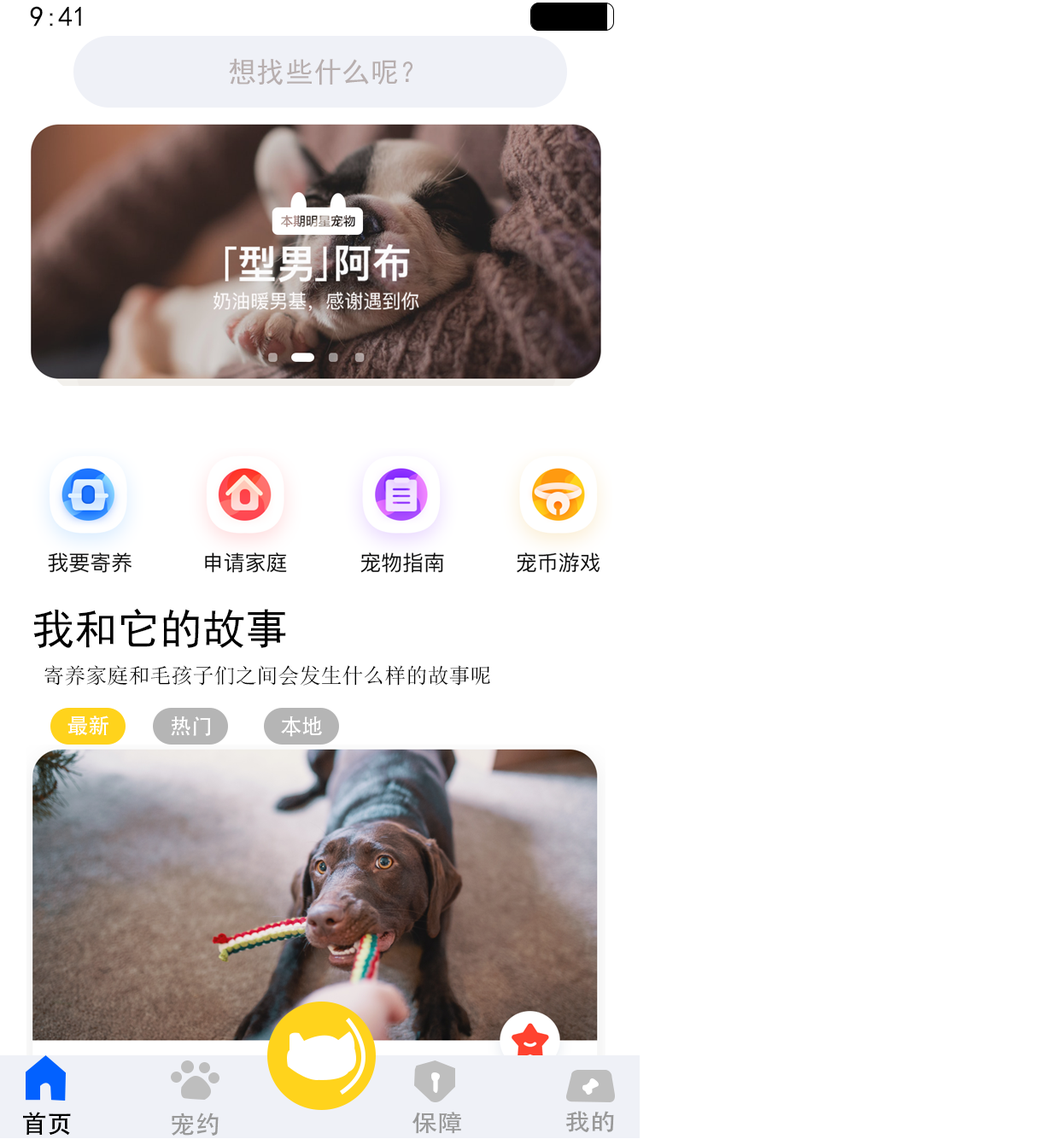
<style>
.page{position:relative;width:1047px;height:1139px;background:#ffffff}
.page>*{position:absolute;margin:0}
.t1{font:28.5px "SimHei";color:#000000}
.t2{font:28.5px "SimHei";color:#b8afaf}
.t3{font:42.7px "SimHei";color:#000000}
.t4{font:21.3px "SimSun";color:#000000}
.t5{font:21.3px "AdobeHeitiStd-Regular";color:#ffffff}
.t6{font:25px "AdobeHeitiStd-Regular";color:#000000}
.t7{font:25px "AdobeHeitiStd-Regular";color:#999999}
.t8{font:23.2px "AdobeHeitiStd-Regular";color:#999999;scale:1.1 1}
</style>
<div class="page">
<p class="t1" style="left:30px;top:6px;width:51px;height:20px">9:41</p>
<p class="t2" style="left:229px;top:58px;width:183px;height:27px">想找些什么呢？</p>
<p class="t3" style="left:33px;top:608px;width:253px;height:40px">我和它的故事</p>
<p class="t4" style="left:44px;top:665px;width:446px;height:21px">寄养家庭和毛孩子们之间会发生什么样的故事呢</p>
<p class="t5" style="left:67px;top:716px;width:41px;height:19px">最新</p>
<p class="t5" style="left:171px;top:716px;width:40px;height:20px">热门</p>
<p class="t5" style="left:281px;top:716px;width:41px;height:21px">本地</p>
<p class="t6" style="left:23px;top:1112px;width:48px;height:24px">首页</p>
<p class="t7" style="left:172px;top:1113px;width:47px;height:23px">宠约</p>
<p class="t8" style="left:412px;top:1112px;width:49px;height:22px">保障</p>
<p class="t8" style="left:565px;top:1111px;width:49px;height:21px">我的</p>
</div>
